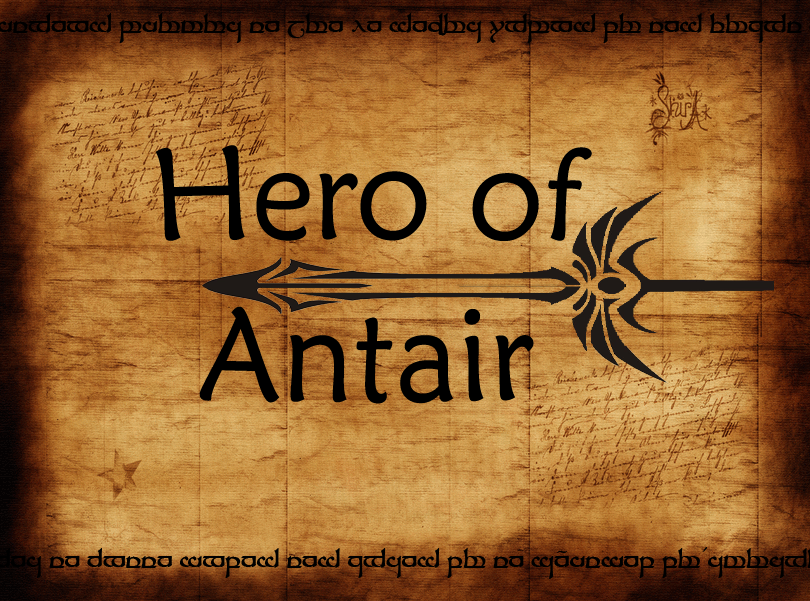
<style>
.page{position:relative;width:810px;height:601px}
.page>*{position:absolute;margin:0}
.t1{font:130px "MaiandraGD-Regular";color:#000000}
</style>
<div class="page">
<p class="t1" style="left:155px;top:145px;width:437px;height:259px;text-align:center">Hero of<br>Antair</p>
</div>
